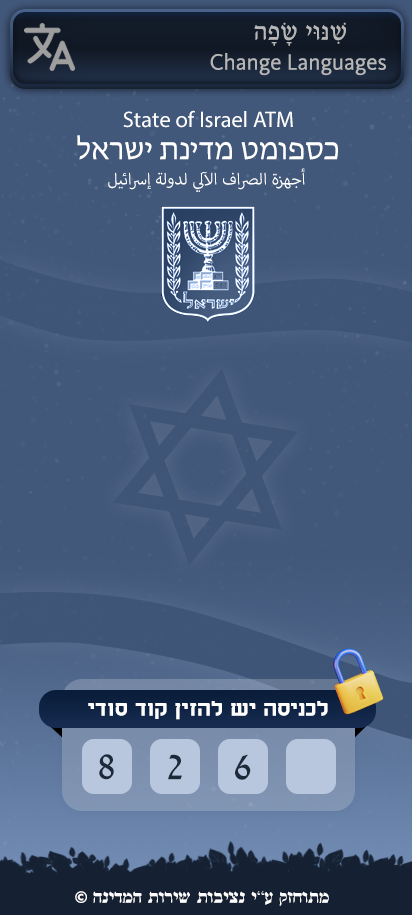
<style>
.page{position:relative;width:412px;height:915px;background:#42587b}
.page>*{position:absolute;margin:0}
.t1{font:27.1px "Narkisim";color:#b7b7b7}
.t2{font:22.9px "KievitOffcPro";color:#b7b7b7}
.t3{font:22.5px "MyriadHebrew-Regular";color:#ffffff}
.t4{font:31.2px "MyriadHebrew-Regular";color:#ffffff}
.t5{font:22.5px "MyriadArabic-Regular";color:#ffffff}
.t6{font:22.5px "GuttmanAharoni-Bold";color:#ffffff}
.t7{font:41.7px "David";color:#1d293b}
.t8{font:16.7px "GuttmanDrogolin-Bold";color:#ffffff}
.t9{font:16.7px "Aharoni-Bold";color:#ffffff}
</style>
<div class="page">
<p class="t1" style="left:254px;top:22px;width:92px;height:24px">שִׁנּוּי שָׂפָה</p>
<p class="t2" style="left:210px;top:53px;width:176px;height:23px">Change Languages</p>
<p class="t3" style="left:123px;top:110px;width:170px;height:18px">State of Israel ATM</p>
<p class="t4" style="left:77px;top:135px;width:261px;height:25px">כספומט מדינת ישראל</p>
<p class="t5" style="left:108px;top:168px;width:197px;height:24px">أجهزة الصراف الآلي لدولة إسرائيل</p>
<p class="t6" style="left:88px;top:701px;width:240px;height:19px">לכניסה יש להזין קוד סודי</p>
<p class="t7" style="left:99px;top:754px;width:15px;height:26px">8</p>
<p class="t7" style="left:168px;top:754px;width:14px;height:26px">2</p>
<p class="t7" style="left:235px;top:754px;width:16px;height:26px">6</p>
<p class="t8" style="left:75px;top:891px;width:254px;height:15px">מתוחזק ע”י נציבות שירות המדינה <span class="t9">©</span></p>
</div>
